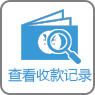
<style>
.page{position:relative;width:95px;height:95px;background:#ffffff}
.page>*{position:absolute;margin:0}
.t1{font:14px "MicrosoftYaHei";color:#3998d6}
</style>
<div class="page">
<p class="t1" style="left:8px;top:68px;width:84px;height:15px">查看收款记录</p>
</div>
